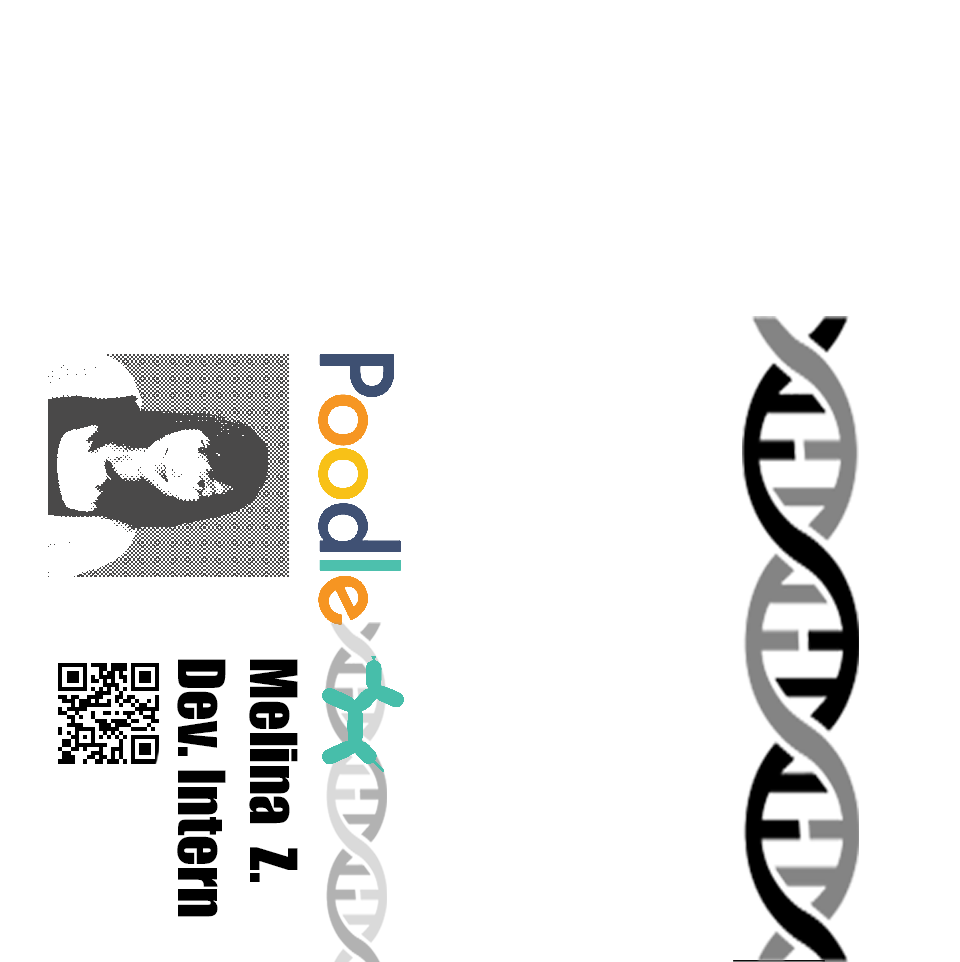
<style>
.page{position:relative;width:960px;height:962px;background:#ffffff}
.page>*{position:absolute;margin:0}
.t1{font:60px "Impact";color:#000000}
</style>
<div class="page">
<p class="t1" style="left:177px;top:659px;width:121px;height:258px;rotate:90deg">Melina  Z.<br>Dev. Intern</p>
</div>
